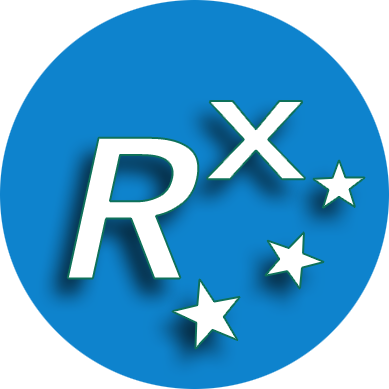
<style>
.page{position:relative;width:389px;height:389px;background:#0e83cd}
.page>*{position:absolute;margin:0}
.t1{font:208px "SimHei";color:#ffffff;font-weight:bold;font-style:italic;scale:1.25 1}
.t2{font:300px "SimHei";color:#ffffff;font-weight:bold;scale:1.33 1}
</style>
<div class="page">
<p class="t1" style="left:67px;top:101px;width:238px;height:178px">R <span class="t2">x</span></p>
</div>
